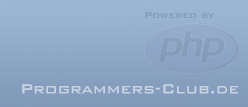
<style>
.page{position:relative;width:248px;height:107px}
.page>*{position:absolute;margin:0}
.t1{font:11px "BankGothicBT-Medium";color:#8199b9}
.t2{font:18px "BankGothicBT-Medium";color:#c8d3e1}
</style>
<div class="page">
<p class="t1" style="left:145px;top:12px;width:70px;height:6px">Powered by</p>
<p class="t2" style="left:22px;top:84px;width:217px;height:10px">Programmers-Club.de</p>
</div>
